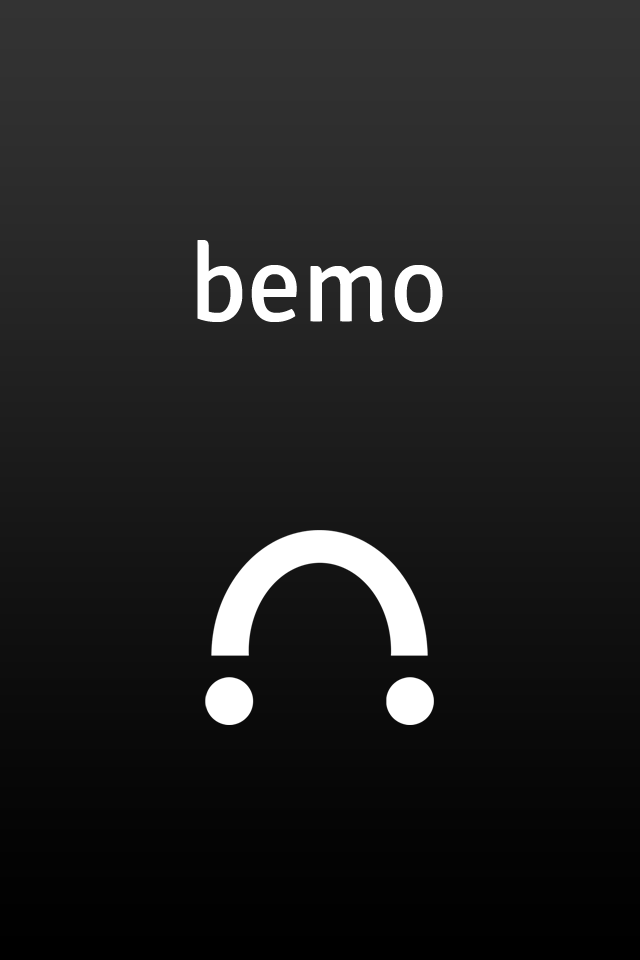
<style>
.page{position:relative;width:640px;height:960px}
.page>*{position:absolute;margin:0}
.t1{font:110px "Signika-Regular";color:#ffffff}
</style>
<div class="page">
<p class="t1" style="left:197px;top:240px;width:246px;height:82px">bemo</p>
</div>
